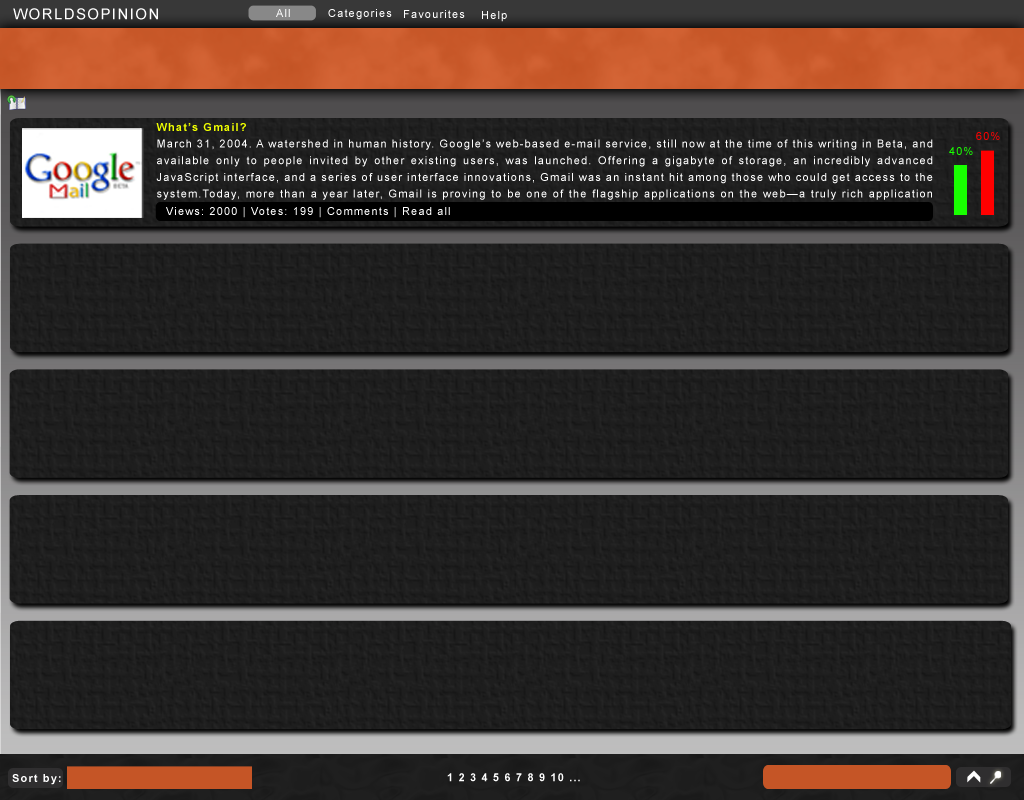
<style>
.page{position:relative;width:1024px;height:800px}
.page>*{position:absolute;margin:0}
.t1{font:14.9px "ArialMT";letter-spacing:0.1em;color:#ffffff}
.t2{font:11.1px "ArialMT";letter-spacing:0.1em;color:#ffffff}
.t3{font:11.1px/16.7px "ArialMT";letter-spacing:0.1em;color:#ffffff}
.t4{font:11.1px/16.7px "Arial-BoldMT";letter-spacing:0.1em;color:#effe00}
.t5{font:11.1px "ArialMT";letter-spacing:0.1em;color:#ff0000}
.t6{font:11.1px "ArialMT";letter-spacing:0.1em;color:#18ff00}
.t7{font:11.1px "Arial-BoldMT";letter-spacing:0.1em;color:#ffffff}
</style>
<div class="page">
<p class="t1" style="left:13px;top:8px;width:145px;height:12px">WORLDSOPINION</p>
<p class="t2" style="left:276px;top:9px;width:14px;height:8px">All</p>
<p class="t2" style="left:328px;top:9px;width:64px;height:11px">Categories</p>
<p class="t2" style="left:404px;top:10px;width:61px;height:8px">Favourites</p>
<p class="t2" style="left:482px;top:11px;width:25px;height:11px">Help</p>
<p class="t3" style="left:156px;top:123px;width:777px;height:77px;text-align:justify"><span class="t4">What’s Gmail?<br></span>March 31, 2004. A watershed in human history. Google’s web-based e-mail service, still now at the time of this writing in Beta, and available only to people invited by other existing users, was launched. Offering a gigabyte of storage, an incredibly advanced JavaScript interface, and a series of user interface innovations, Gmail was an instant hit among those who could get access to the system.Today, more than a year later, Gmail is proving to be one of the flagship applications on the web—a truly rich application within the browser, combined with the serverbased power of the world’s leading search engine.</p>
<p class="t5" style="left:976px;top:132px;width:24px;height:8px">60%</p>
<p class="t6" style="left:949px;top:147px;width:24px;height:8px">40%</p>
<p class="t2" style="left:166px;top:207px;width:284px;height:11px">Views: 2000 | Votes: 199 | Comments | Read all</p>
<p class="t7" style="left:12px;top:774px;width:49px;height:11px">Sort by:</p>
<p class="t7" style="left:447px;top:773px;width:133px;height:9px">1 2 3 4 5 6 7 8 9 10 ...</p>
</div>
